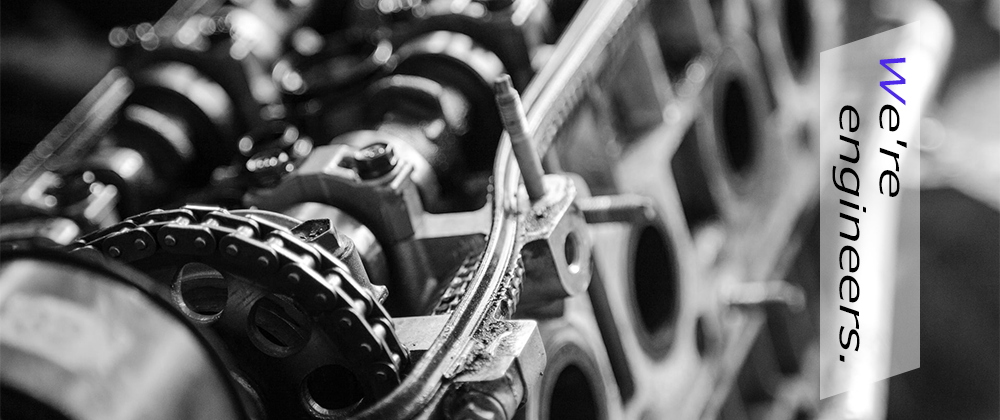
<style>
.page{position:relative;width:1000px;height:420px}
.page>*{position:absolute;margin:0}
.t1{font:52.5px/40px "Meiryo-Italic";color:#000000;scale:0.67 1}
.t2{font:52.5px/40px "Meiryo-Italic";color:#4d28e9;scale:0.67 1}
</style>
<div class="page">
<p class="t1" style="left:832px;top:57px;width:75px;height:305px"><span class="t2">W</span>e're<br>   engineers.</p>
</div>
